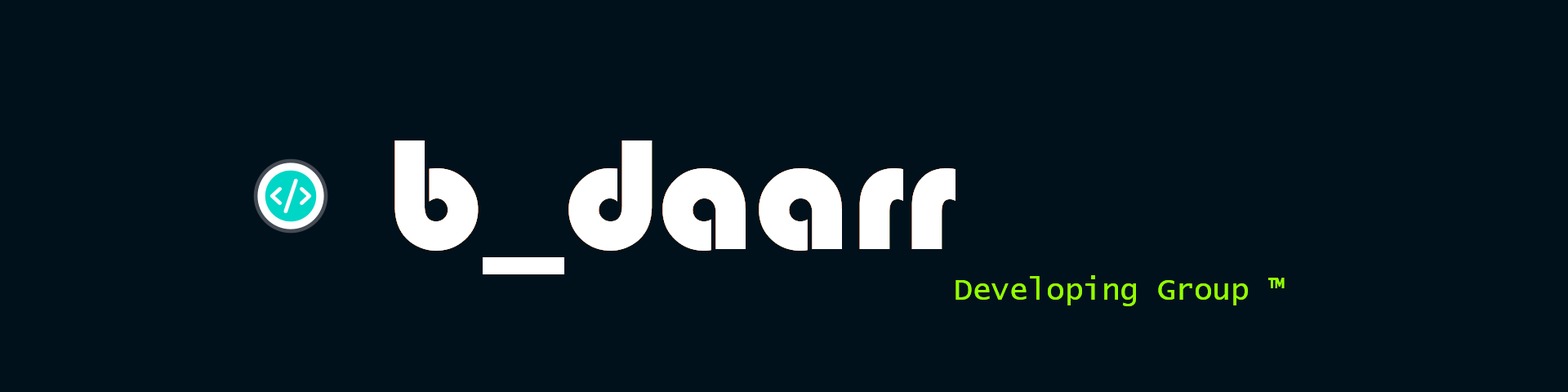
<style>
.page{position:relative;width:1568px;height:392px;background:#00111c}
.page>*{position:absolute;margin:0}
.t1{font:163.3px "Bauhaus93";color:#ffffff}
.t2{font:30.6px "LucidaConsole";color:#94ff00}
</style>
<div class="page">
<p class="t1" style="left:394px;top:140px;width:562px;height:134px">b_daarr</p>
<p class="t2" style="left:956px;top:275px;width:329px;height:31px">Developing Group ™</p>
</div>
